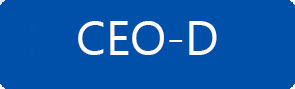
<style>
.page{position:relative;width:295px;height:89px;background:#0050a9}
.page>*{position:absolute;margin:0}
.t1{font:48px "Gadugi";color:#fdfdfe}
</style>
<div class="page">
<p class="t1" style="left:78px;top:21px;width:139px;height:34px">CEO-D</p>
</div>
